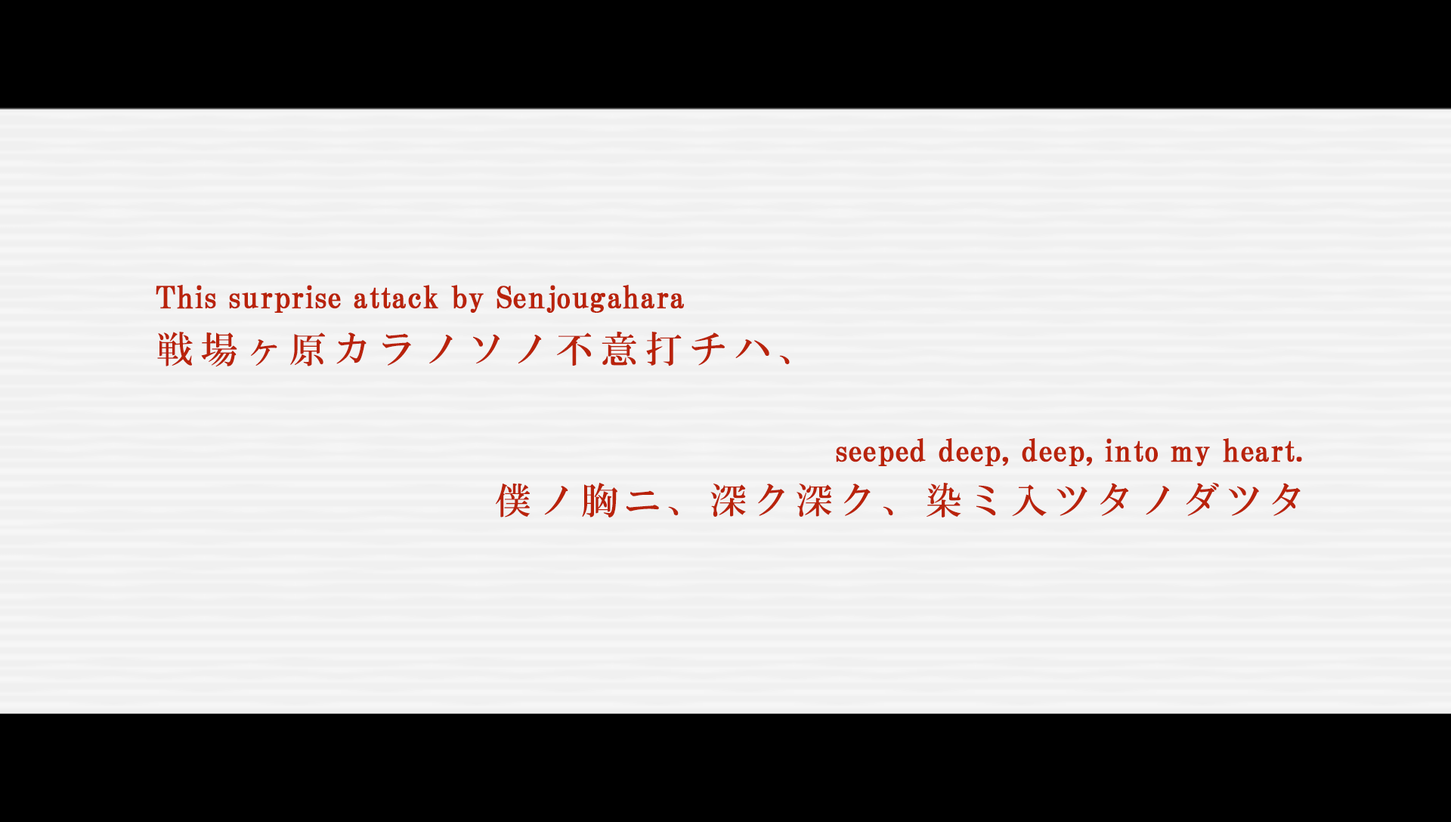
<style>
.page{position:relative;width:1451px;height:822px;background:#f0f0f0}
.page>*{position:absolute;margin:0}
.t1{font:30.2px/153.1px "HGPMinchoB";letter-spacing:0.01em;color:#b9230b;font-weight:bold}
.t2{font:37px "HGMinchoB";letter-spacing:0.2em;color:#b9230b}
.t3{font:37px "HGMinchoB";letter-spacing:0.16em;color:#b9230b}
</style>
<div class="page">
<p class="t1" style="left:156px;top:285px;width:1146px;height:181px">This surprise attack by Senjougahara<br>                          seeped deep, deep, into my heart.</p>
<p class="t2" style="left:157px;top:331px;width:633px;height:36px">戦場ヶ原カラノソノ不意打チハ、</p>
<p class="t3" style="left:496px;top:483px;width:804px;height:35px">僕ノ胸ニ、深ク深ク、染ミ入ツタノダツタ</p>
</div>
